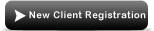
<style>
.page{position:relative;width:154px;height:31px}
.page>*{position:absolute;margin:0}
.t1{font:9.8px "ArialRoundedMTBold";letter-spacing:0.05em;color:#ffffff;scale:0.95 1}
</style>
<div class="page">
<p class="t1" style="left:29px;top:11px;width:117px;height:10px">New Client Registration</p>
</div>
